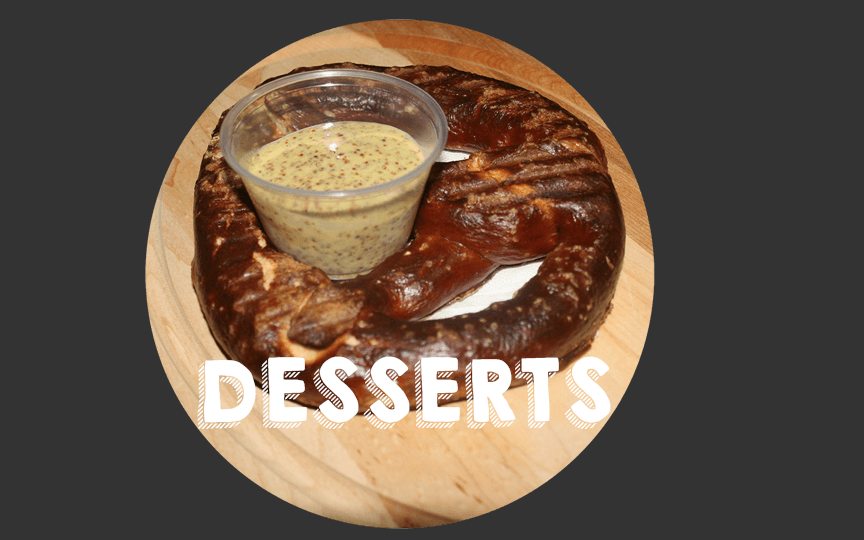
<style>
.page{position:relative;width:864px;height:540px;background:#333333}
.page>*{position:absolute;margin:0}
.t1{font:77px "KGHAPPY";color:#ffffff;text-transform:uppercase}
</style>
<div class="page">
<p class="t1" style="left:197px;top:356px;width:414px;height:74px">Desserts</p>
</div>
